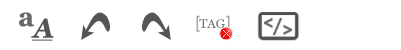
<style>
.page{position:relative;width:401px;height:50px;background:#ffffff}
.page>*{position:absolute;margin:0}
.t1{font:26.9px "Vani-Bold";letter-spacing:-0.075em;color:#696969}
.t2{font:26.9px "Vani-Bold";letter-spacing:-0.075em;color:#555555;font-style:italic}
.t3{font:18px "Vani";color:#6b6b6b;font-variant:small-caps}
.t4{font:19.2px "Small Fonts";color:#a6a0a0}
.t5{font:18.6px "Tunga";color:#fed1d1;font-variant:small-caps}
.t6{font:20px "CooperBlackStd";letter-spacing:-0.01em;color:#696969;font-variant:small-caps;scale:0.87 1}
</style>
<div class="page">
<p class="t1" style="left:19px;top:12px;width:35px;height:26px">a<span class="t2">A</span></p>
<p class="t3" style="left:196px;top:15px;width:34px;height:17px"><span class="t4">[</span>tag<span class="t4">]</span></p>
<p class="t5" style="left:223px;top:30px;width:7px;height:7px">x</p>
<p class="t6" style="left:264px;top:18px;width:28px;height:17px">&lt;/&gt;</p>
</div>
